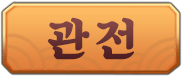
<style>
.page{position:relative;width:183px;height:76px}
.page>*{position:absolute;margin:0}
.t1{font:46.1px "SDKukdetopokki-bBd";letter-spacing:0.12em}
</style>
<div class="page">
<p class="t1" style="left:47px;top:17px;width:87px;height:43px">관전</p>
</div>
